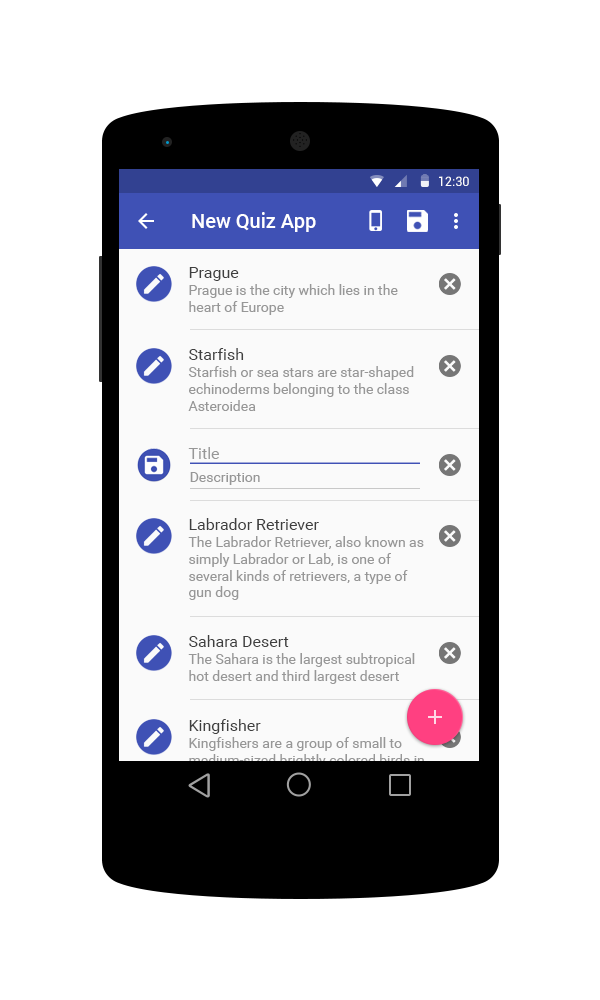
<style>
.page{position:relative;width:600px;height:1000px;background:#ffffff}
.page>*{position:absolute;margin:0}
.t1{font:12.7px "Roboto-Regular";color:#ffffff}
.t2{font:20px "Roboto-Medium";color:#ffffff}
.t3{font:16px "Roboto-Regular";color:#3f3f3f}
.t4{font:14px "Roboto-Regular";color:#979797}
.t5{font:16px/48px "Roboto-Regular";color:#979797}
.t6{font:16px "Roboto-Regular";color:#979797}
</style>
<div class="page">
<p class="t1" style="left:439px;top:176px;width:30px;height:10px">12:30</p>
<p class="t2" style="left:192px;top:212px;width:124px;height:20px">New Quiz App</p>
<p class="t3" style="left:189px;top:267px;width:50px;height:14px">Prague</p>
<p class="t4" style="left:189px;top:284px;width:209px;height:31px">Prague is the city which lies in the <br>heart of Europe<br><span class="t5"><br><br> heart of Europe.</span></p>
<p class="t3" style="left:189px;top:348px;width:55px;height:12px">Starfish</p>
<p class="t4" style="left:188px;top:366px;width:226px;height:45px">Starfish or sea stars are star-shaped echinoderms belonging to the class Asteroidea</p>
<p class="t6" style="left:188px;top:447px;width:31px;height:12px">Title</p>
<p class="t4" style="left:190px;top:472px;width:70px;height:13px">Description</p>
<p class="t3" style="left:189px;top:518px;width:130px;height:12px">Labrador Retriever</p>
<p class="t4" style="left:188px;top:536px;width:236px;height:64px">The Labrador Retriever, also known as simply Labrador or Lab, is one of <br>several kinds of retrievers, a type of<br>gun dog</p>
<p class="t3" style="left:189px;top:635px;width:100px;height:12px">Sahara Desert</p>
<p class="t4" style="left:188px;top:653px;width:227px;height:31px">The Sahara is the largest subtropical hot desert and third largest desert</p>
<p class="t3" style="left:189px;top:719px;width:72px;height:15px">Kingfisher</p>
</div>
